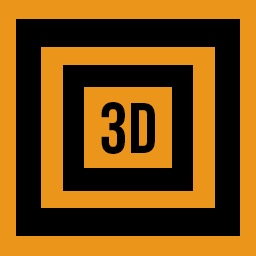
<style>
.page{position:relative;width:256px;height:256px;background:#eb951b}
.page>*{position:absolute;margin:0}
.t1{font:72px "BebasNeueBold";color:#000000}
</style>
<div class="page">
<p class="t1" style="left:101px;top:102px;width:54px;height:52px">3D</p>
</div>
